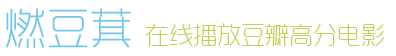
<style>
.page{position:relative;width:396px;height:56px;background:#ffffff}
.page>*{position:absolute;margin:0}
.t1{font:42px "RTWSYueGoTrial-ExLight";color:#72c7eb;font-weight:bold}
.t2{font:24px "RTWSYueGoTrial-ExLight";color:#bad455}
</style>
<div class="page">
<p class="t1" style="left:5px;top:8px;width:126px;height:40px">燃豆萁</p>
<p class="t2" style="left:145px;top:23px;width:239px;height:24px">在线播放豆瓣高分电影</p>
</div>
